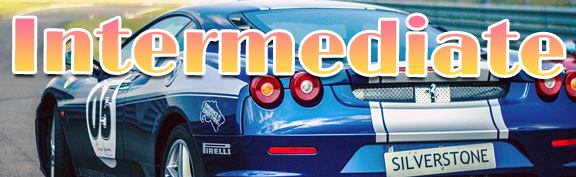
<style>
.page{position:relative;width:576px;height:177px}
.page>*{position:absolute;margin:0}
.t1{font:76.2px "Limelight-Regular"}
</style>
<div class="page">
<p class="t1" style="left:15px;top:15px;width:549px;height:61px">Intermediate</p>
</div>
